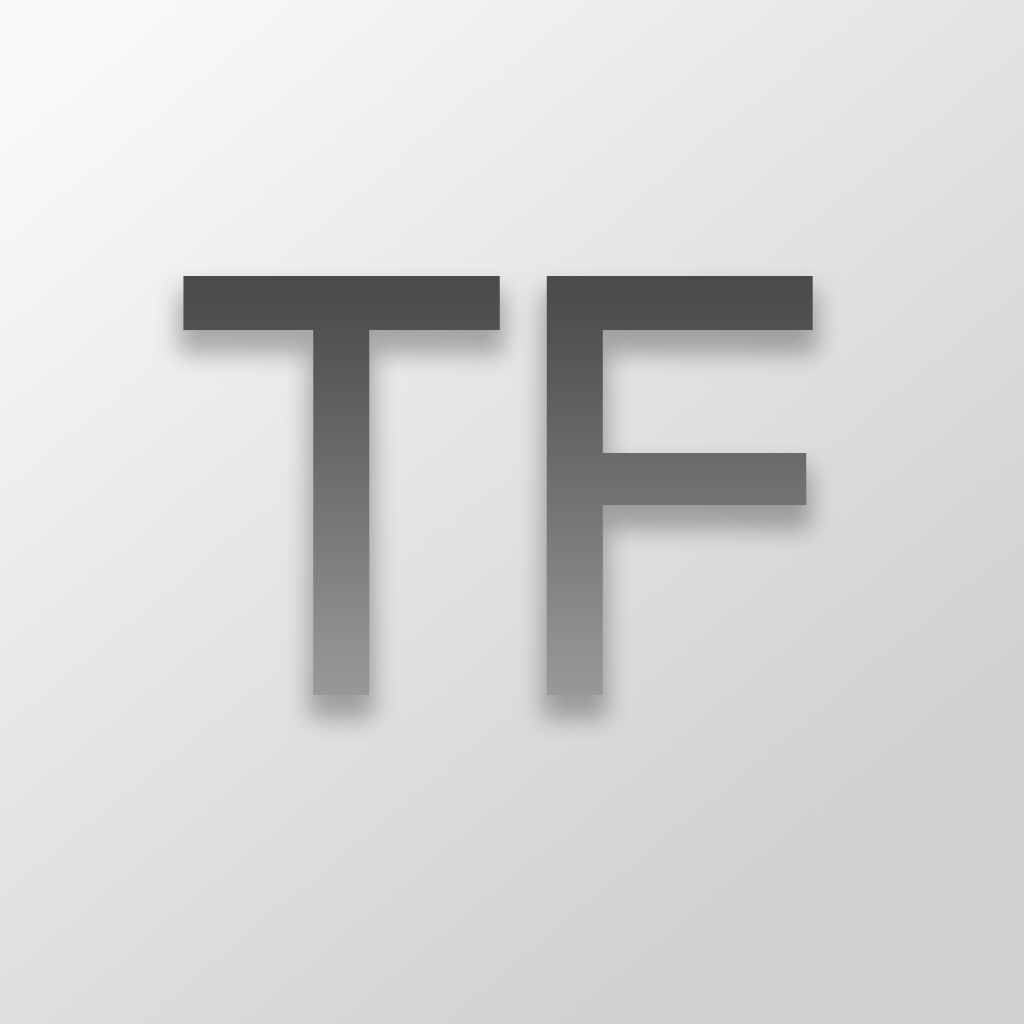
<style>
.page{position:relative;width:1024px;height:1024px}
.page>*{position:absolute;margin:0}
.t1{font:577.4px "BPGSuperSquare";letter-spacing:0.01em}
</style>
<div class="page">
<p class="t1" style="left:183px;top:276px;width:630px;height:419px">TF</p>
</div>
